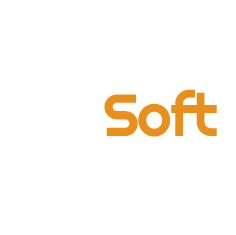
<style>
.page{position:relative;width:236px;height:235px;background:#ffffff}
.page>*{position:absolute;margin:0}
.t1{font:59.3px "Righteous-Regular";letter-spacing:-0.025em;color:#e98f1b}
.t2{font:59.3px "Righteous-Regular";letter-spacing:-0.025em;color:#ffffff}
</style>
<div class="page">
<p class="t1" style="left:13px;top:89px;width:204px;height:48px"><span class="t2">Woi</span>Soft</p>
</div>
